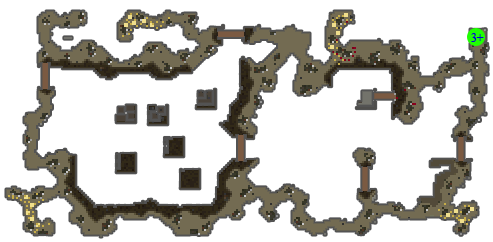
<style>
.page{position:relative;width:493px;height:242px;background:#ffffff}
.page>*{position:absolute;margin:0}
.t1{font:20px "TimesNewRomanPSMT";color:#0101dd}
</style>
<div class="page">
<p class="t1" style="left:471px;top:33px;width:13px;height:9px">3+</p>
</div>
